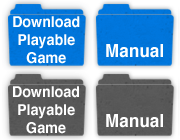
<style>
.page{position:relative;width:180px;height:140px}
.page>*{position:absolute;margin:0}
.t1{font:15px "Helvetica-Bold";color:#ffffff;scale:0.95 1}
.t2{font:18px "Helvetica-Bold";color:#ffffff;scale:0.95 1}
</style>
<div class="page">
<p class="t1" style="left:13px;top:16px;width:67px;height:48px;text-align:center">Download<br>Playable<br>Game</p>
<p class="t2" style="left:106px;top:44px;width:57px;height:14px">Manual</p>
<p class="t1" style="left:13px;top:86px;width:66px;height:48px;text-align:center">Download<br>Playable<br>Game</p>
<p class="t2" style="left:106px;top:114px;width:57px;height:14px">Manual</p>
</div>
